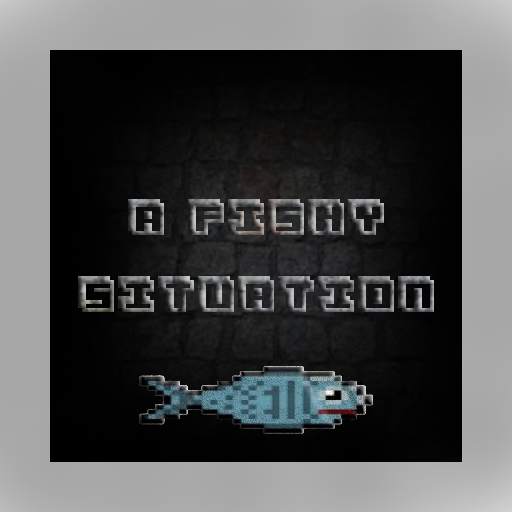
<style>
.page{position:relative;width:512px;height:512px}
.page>*{position:absolute;margin:0}
.t1{font:64px "3Dventure"}
</style>
<div class="page">
<p class="t1" style="left:78px;top:199px;width:356px;height:113px;text-align:center">a fishy<br>situation</p>
</div>
